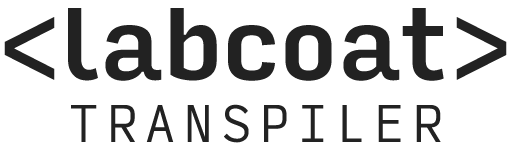
<style>
.page{position:relative;width:512px;height:152px;background:#ffffff}
.page>*{position:absolute;margin:0}
.t1{font:50.8px/62.3px "InputMonoNarrow-Light";letter-spacing:0.15em;color:#222222}
.t2{font:98.3px "InputSansNarrow-Medium";letter-spacing:-0.125em;color:#222222}
.t3{font:98.3px "InputSansNarrow-Medium";letter-spacing:-0.075em;color:#222222}
</style>
<div class="page">
<p class="t1" style="left:4px;top:8px;width:503px;height:135px;text-align:center"><span class="t2">&lt;</span><span class="t3">labcoat&gt;<br></span>TRANSPILER</p>
</div>
